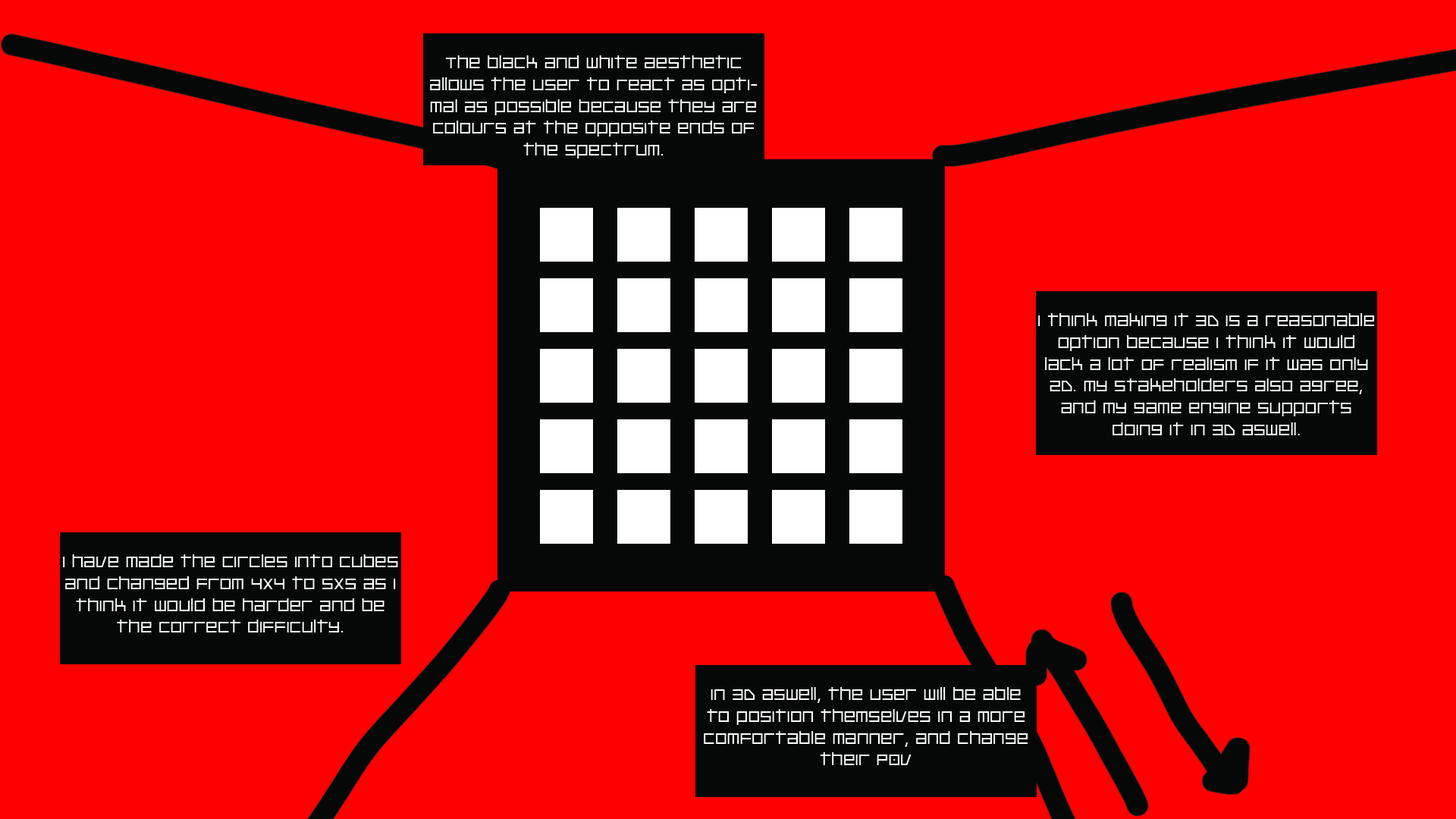
<style>
.page{position:relative;width:1456px;height:819px;background:#ff0000}
.page>*{position:absolute;margin:0}
.t1{font:18.2px "PlatinumBeatBTN";color:#ffffff}
</style>
<div class="page">
<p class="t1" style="left:430px;top:55px;width:328px;height:103px;text-align:center">The black and white aesthetic allows the user to react as optimal as possible because they are colours at the opposite ends of the spectrum.</p>
<p class="t1" style="left:1038px;top:313px;width:337px;height:122px;text-align:center">I think making it 3D is a reasonable option because I think it would lack a lot of realism if it was only 2D. My stakeholders also agree, and my game engine supports doing it in 3D aswell.</p>
<p class="t1" style="left:63px;top:554px;width:335px;height:78px;text-align:center">I have made the circles into cubes and changed from 4x4 to 5x5 as I think it would be harder and be the correct difficulty.</p>
<p class="t1" style="left:704px;top:687px;width:324px;height:78px;text-align:center">IN 3D aswell, the user will be able to position themselves in a more comfortable manner, and change their POV</p>
</div>
